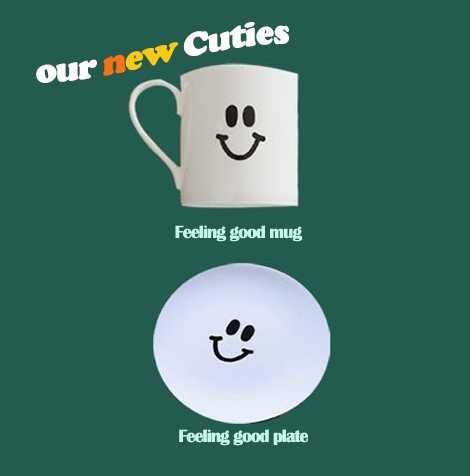
<style>
.page{position:relative;width:470px;height:476px;background:#235b4e}
.page>*{position:absolute;margin:0}
.t1{font:36px "CooperBlack";letter-spacing:-0.05em;color:#fbfdfd}
.t2{font:36px "CooperBlack";letter-spacing:-0.05em;color:#fb710b}
.t3{font:36px "CooperBlack";letter-spacing:-0.05em;color:#f9ca0d}
.t4{font:18px "BritannicBold";letter-spacing:-0.05em;color:#c5f7eb}
</style>
<div class="page">
<p class="t1" style="left:36px;top:22px;width:253px;height:61px">our <span class="t2">n</span><span class="t3">ew</span> Cuties</p>
<p class="t4" style="left:179px;top:429px;width:129px;height:17px">Feeling good plate</p>
</div>
